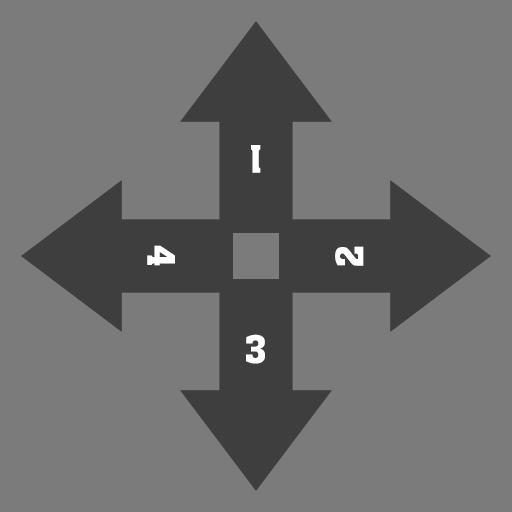
<style>
.page{position:relative;width:512px;height:512px;background:#7b7b7b}
.page>*{position:absolute;margin:0}
.t1{font:41.6px "AachenComWebMedium";color:#ffffff}
</style>
<div class="page">
<p class="t1" style="left:251px;top:145px;width:10px;height:28px;rotate:180deg">1</p>
<p class="t1" style="left:147px;top:245px;width:28px;height:21px;rotate:90deg">4</p>
<p class="t1" style="left:335px;top:246px;width:29px;height:20px;rotate:-90deg">2</p>
<p class="t1" style="left:246px;top:334px;width:19px;height:30px">3</p>
</div>
